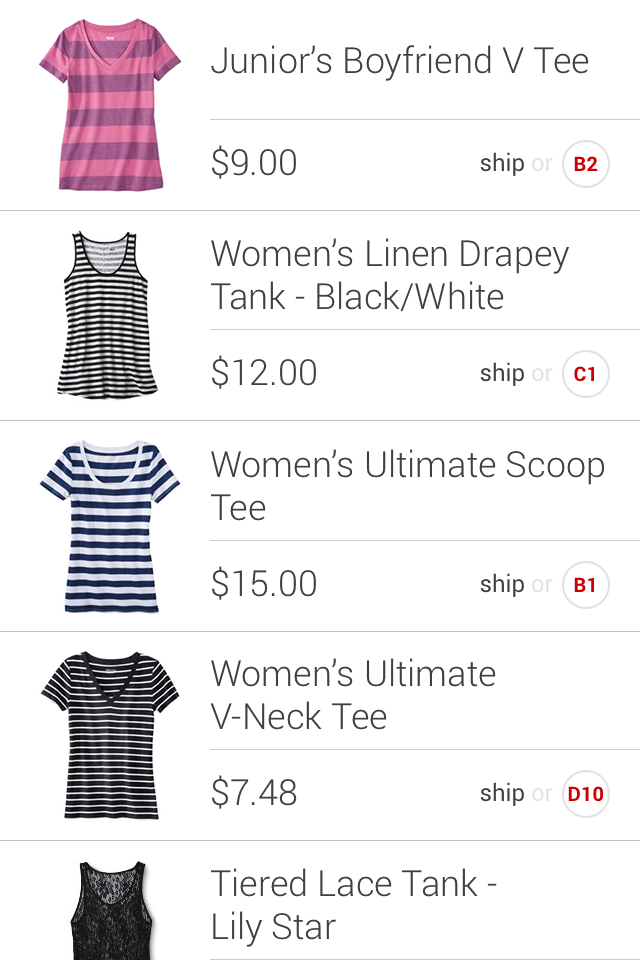
<style>
.page{position:relative;width:640px;height:960px;background:#ffffff}
.page>*{position:absolute;margin:0}
.t1{font:36px "Roboto-Light";color:#404040}
.t2{font:24px "Roboto-Regular";color:#404040}
.t3{font:24px "Roboto-Regular";color:#e2e2e2}
.t4{font:20px "Roboto-Bold";color:#cc0000}
</style>
<div class="page">
<p class="t1" style="left:211px;top:45px;width:378px;height:36px">Junior’s Boyfriend V Tee</p>
<p class="t1" style="left:212px;top:145px;width:84px;height:34px">$9.00</p>
<p class="t2" style="left:480px;top:152px;width:73px;height:24px">ship <span class="t3">or</span></p>
<p class="t4" style="left:574px;top:156px;width:24px;height:15px">B2</p>
<p class="t1" style="left:211px;top:238px;width:358px;height:74px">Women’s Linen Drapey<br>Tank - Black/White</p>
<p class="t1" style="left:212px;top:355px;width:104px;height:34px">$12.00</p>
<p class="t2" style="left:480px;top:362px;width:73px;height:24px">ship <span class="t3">or</span></p>
<p class="t4" style="left:574px;top:366px;width:20px;height:16px">C1</p>
<p class="t1" style="left:211px;top:449px;width:394px;height:72px">Women’s Ultimate Scoop<br>Tee</p>
<p class="t1" style="left:212px;top:566px;width:104px;height:34px">$15.00</p>
<p class="t2" style="left:480px;top:573px;width:73px;height:24px">ship <span class="t3">or</span></p>
<p class="t4" style="left:574px;top:577px;width:20px;height:15px">B1</p>
<p class="t1" style="left:210px;top:658px;width:286px;height:72px">Women’s Ultimate<br>V-Neck Tee</p>
<p class="t1" style="left:212px;top:775px;width:85px;height:34px">$7.48</p>
<p class="t2" style="left:480px;top:782px;width:73px;height:24px">ship <span class="t3">or</span></p>
<p class="t4" style="left:568px;top:786px;width:36px;height:16px">D10</p>
<p class="t1" style="left:211px;top:868px;width:286px;height:79px">Tiered Lace Tank - <br>Lily Star</p>
</div>
